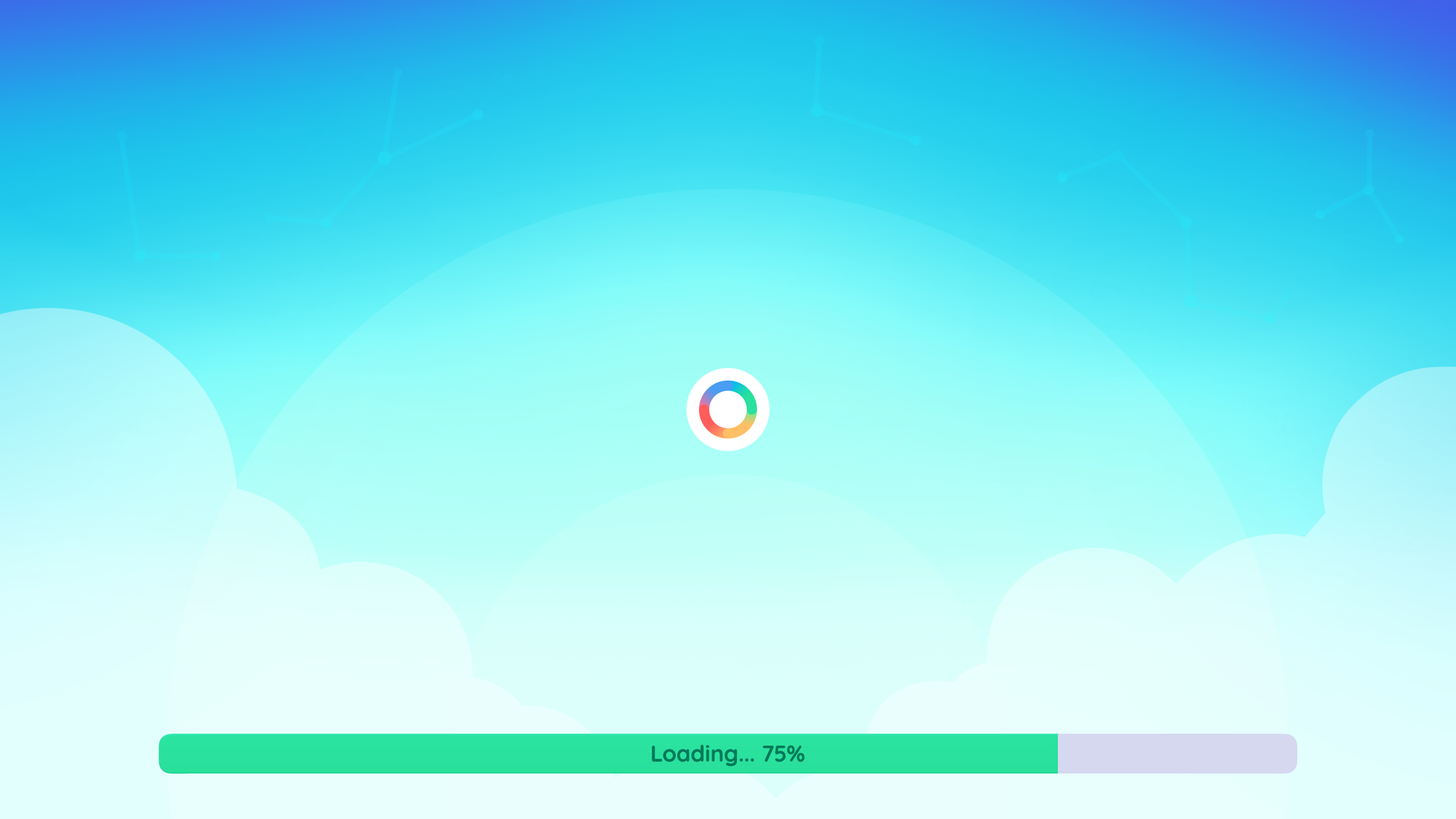
<style>
.page{position:relative;width:1456px;height:819px}
.page>*{position:absolute;margin:0}
.t1{font:22.7px "Quicksand-Bold";color:#007a59}
</style>
<div class="page">
<p class="t1" style="left:652px;top:744px;width:153px;height:23px">Loading... 75%</p>
</div>
